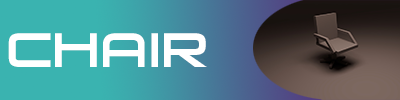
<style>
.page{position:relative;width:400px;height:100px;background:#3ab3b0}
.page>*{position:absolute;margin:0}
.t1{font:45.8px "VenusRising-Regular";color:#ffffff}
</style>
<div class="page">
<p class="t1" style="left:8px;top:33px;width:199px;height:34px">Chair</p>
</div>
